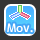
<style>
.page{position:relative;width:40px;height:40px;background:#333333}
.page>*{position:absolute;margin:0}
.t1{font:12px "JK-Gothic-M";color:#ffffff}
</style>
<div class="page">
<p class="t1" style="left:7px;top:23px;width:26px;height:10px">Mov.</p>
</div>
